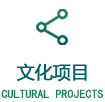
<style>
.page{position:relative;width:105px;height:102px;background:#ffffff}
.page>*{position:absolute;margin:0}
.t1{font:18px "MicrosoftYaHei";letter-spacing:-0.025em;color:#016266;font-weight:bold}
.t2{font:12px "SimHei";color:#208157;text-transform:uppercase}
</style>
<div class="page">
<p class="t1" style="left:16px;top:63px;width:71px;height:19px">文化项目</p>
<p class="t2" style="left:1px;top:89px;width:102px;height:9px">Cultural projects</p>
</div>
